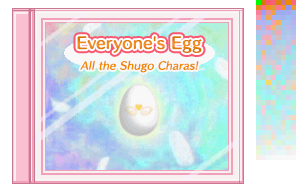
<style>
.page{position:relative;width:296px;height:192px}
.page>*{position:absolute;margin:0}
.t1{font:15px "HummingStd-B";letter-spacing:0.02em;color:#e68211}
.t2{font:10px "HummingStd-D";letter-spacing:0.02em;color:#f08800;font-style:italic}
</style>
<div class="page">
<p class="t1" style="left:77px;top:36px;width:125px;height:17px">Everyone's Egg</p>
<p class="t2" style="left:80px;top:60px;width:119px;height:13px">All the Shugo Charas!</p>
</div>
